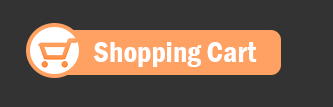
<style>
.page{position:relative;width:333px;height:107px;background:#333333}
.page>*{position:absolute;margin:0}
.t1{font:30px "FranklinGothic-DemiCond";color:#ffffff}
</style>
<div class="page">
<p class="t1" style="left:93px;top:42px;width:164px;height:25px">Shopping Cart</p>
</div>
